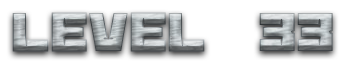
<style>
.page{position:relative;width:364px;height:64px;background:#ffffff}
.page>*{position:absolute;margin:0}
.t1{font:60px "BananaBrick"}
</style>
<div class="page">
<p class="t1" style="left:12px;top:12px;width:321px;height:40px">Level  33</p>
</div>
